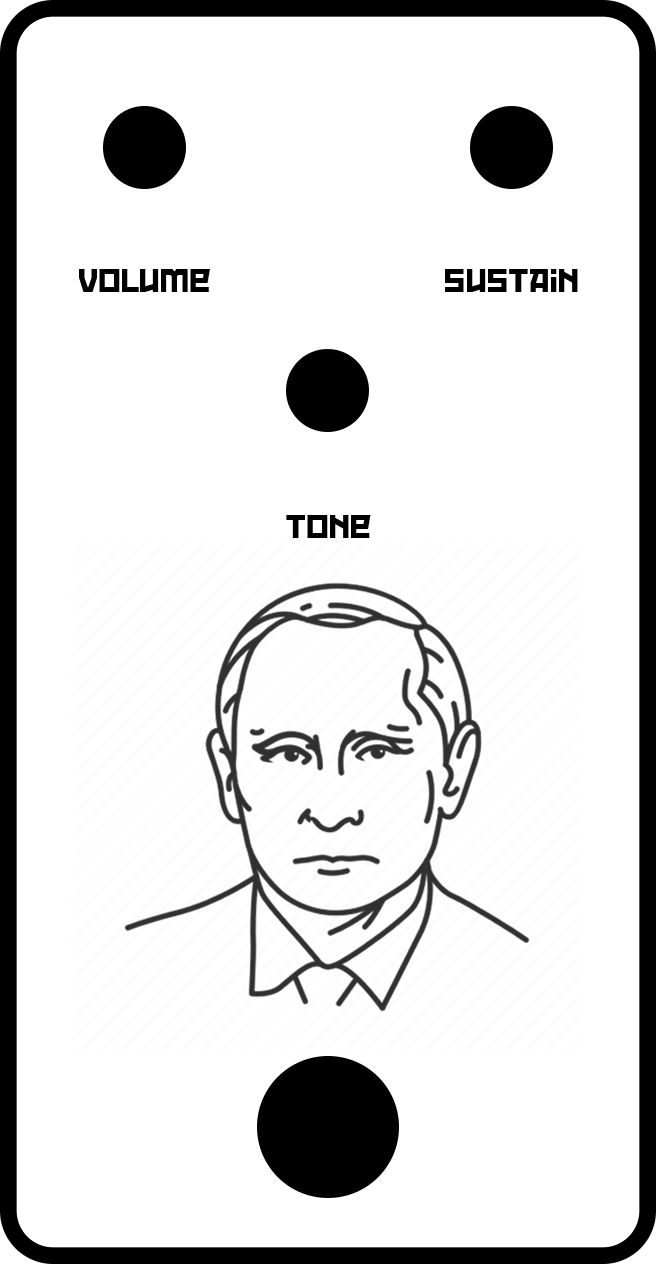
<style>
.page{position:relative;width:656px;height:1264px;background:#ffffff}
.page>*{position:absolute;margin:0}
.t1{font:29.2px "RedOctober";color:#000000}
</style>
<div class="page">
<p class="t1" style="left:79px;top:269px;width:131px;height:23px">Volume</p>
<p class="t1" style="left:445px;top:269px;width:133px;height:23px">Sustain</p>
<p class="t1" style="left:286px;top:515px;width:85px;height:23px">Tone</p>
</div>
